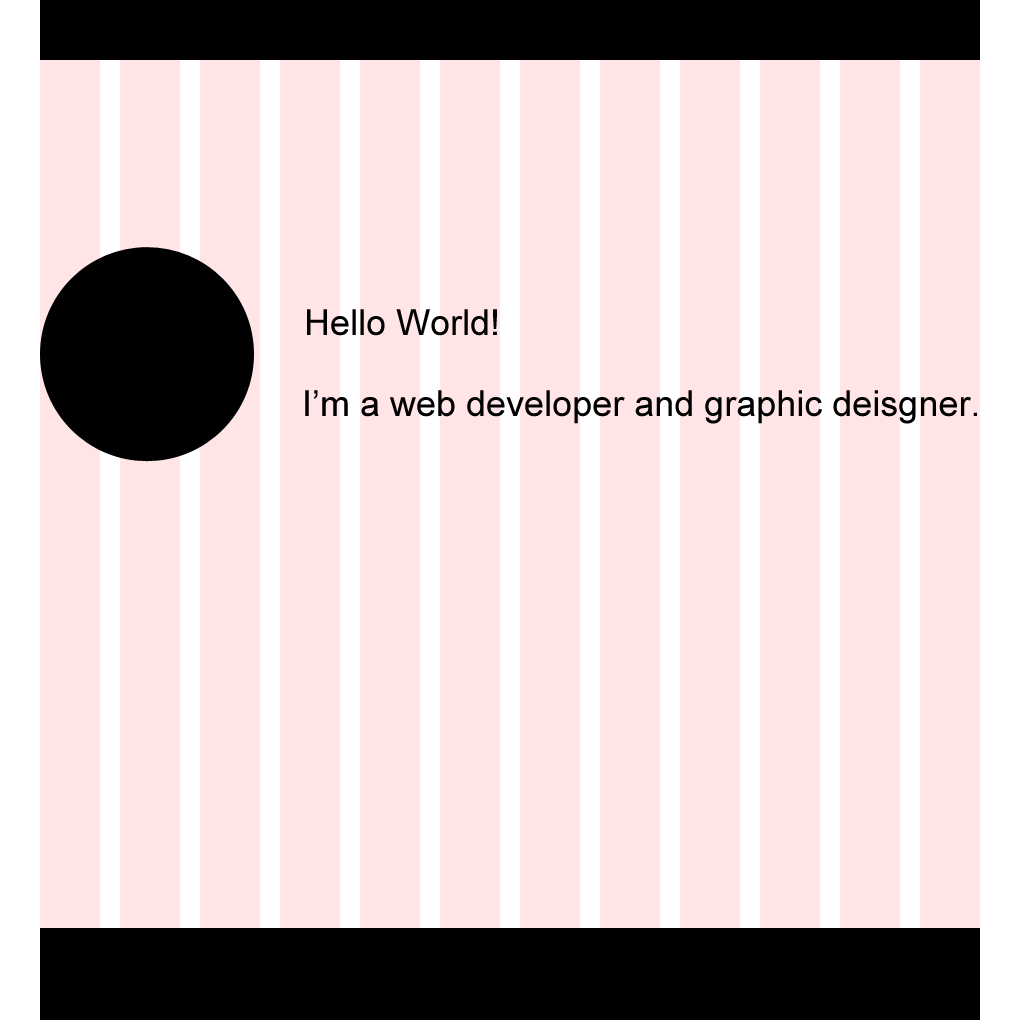
<style>
.page{position:relative;width:1020px;height:1020px;background:#ffe5e5}
.page>*{position:absolute;margin:0}
.t1{font:36px "ArialMT";color:#000000}
</style>
<div class="page">
<p class="t1" style="left:307px;top:309px;width:190px;height:27px">Hello World!</p>
<p class="t1" style="left:305px;top:390px;width:672px;height:34px">I’m a web developer and graphic deisgner.</p>
</div>
